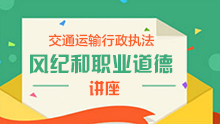
<style>
.page{position:relative;width:220px;height:124px;background:#f8f5e4}
.page>*{position:absolute;margin:0}
.t1{font:13.2px "FZLTZHK--GBK1-0";color:#fb5e27}
.t2{font:20.8px "JLinXin";color:#3cac7c}
.t3{font:16px "JLinXin";color:#fd5c28}
</style>
<div class="page">
<p class="t1" style="left:48px;top:33px;width:107px;height:14px">交通运输行政执法</p>
<p class="t2" style="left:30px;top:54px;width:143px;height:20px">风纪和职业道德</p>
<p class="t3" style="left:89px;top:80px;width:31px;height:16px">讲座</p>
</div>
